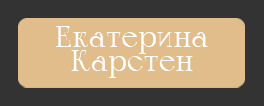
<style>
.page{position:relative;width:264px;height:106px;background:#e0bd8b}
.page>*{position:absolute;margin:0}
.t1{font:30px/24px "Calypso-Regular";color:#ffffff}
</style>
<div class="page">
<p class="t1" style="left:56px;top:26px;width:152px;height:52px;text-align:center">Екатерина <br>Карстен</p>
</div>
